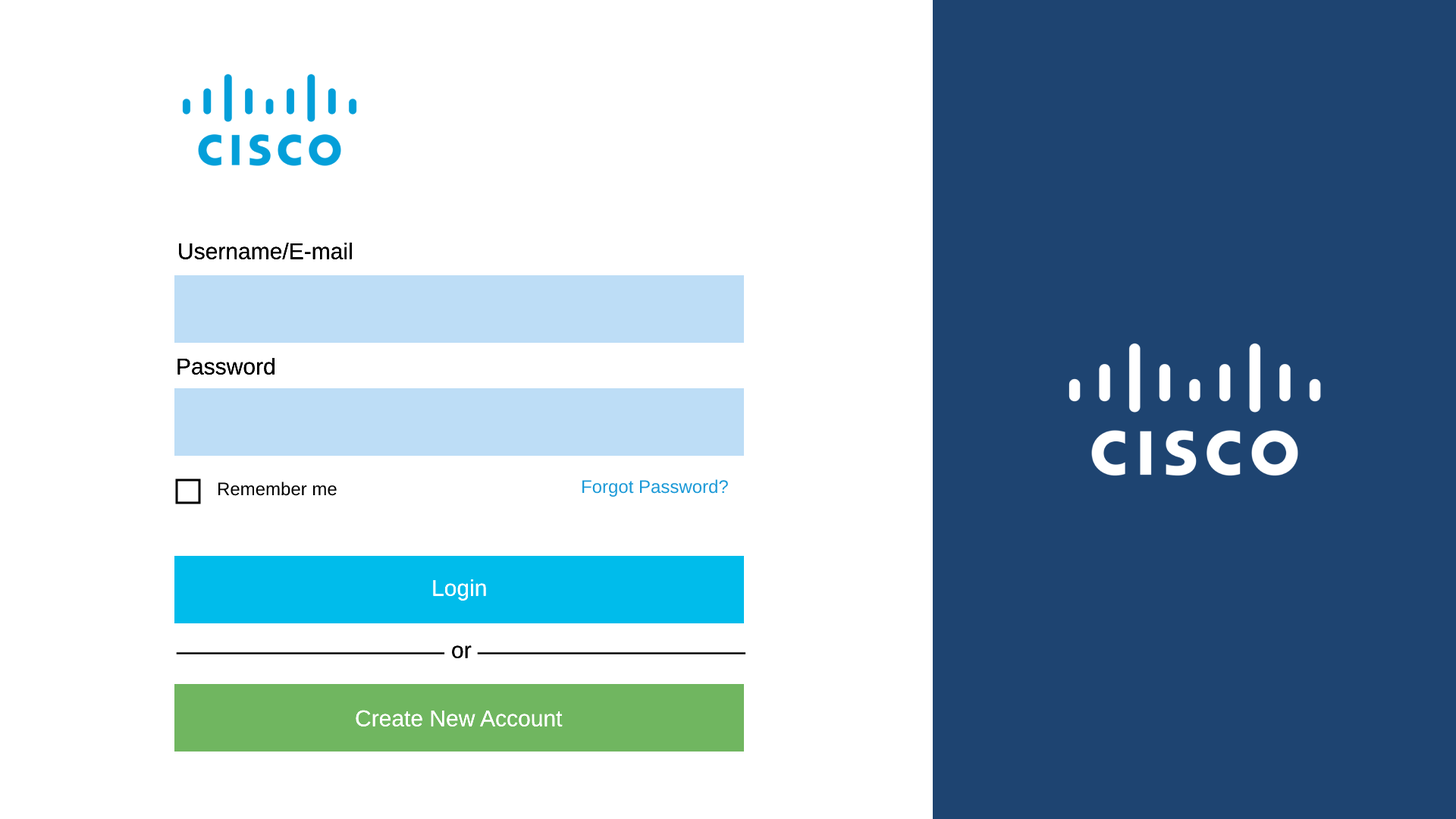
<style>
.page{position:relative;width:1456px;height:819px;background:#ffffff}
.page>*{position:absolute;margin:0}
.t1{font:22.7px "LiberationSans";color:#000000}
.t2{font:18.2px "LiberationSans";color:#1a99d7}
.t3{font:22.7px "LiberationSans";color:#ffffff}
</style>
<div class="page">
<p class="t1" style="left:179px;top:242px;width:173px;height:17px">Username/E-mail</p>
<p class="t1" style="left:177px;top:357px;width:98px;height:18px">Password</p>
<p class="t2" style="left:582px;top:479px;width:146px;height:18px">Forgot Password?</p>
<p class="t3" style="left:433px;top:579px;width:53px;height:22px">Login</p>
<p class="t1" style="left:452px;top:645px;width:20px;height:13px">or</p>
<p class="t3" style="left:356px;top:710px;width:207px;height:16px">Create New Account</p>
</div>
